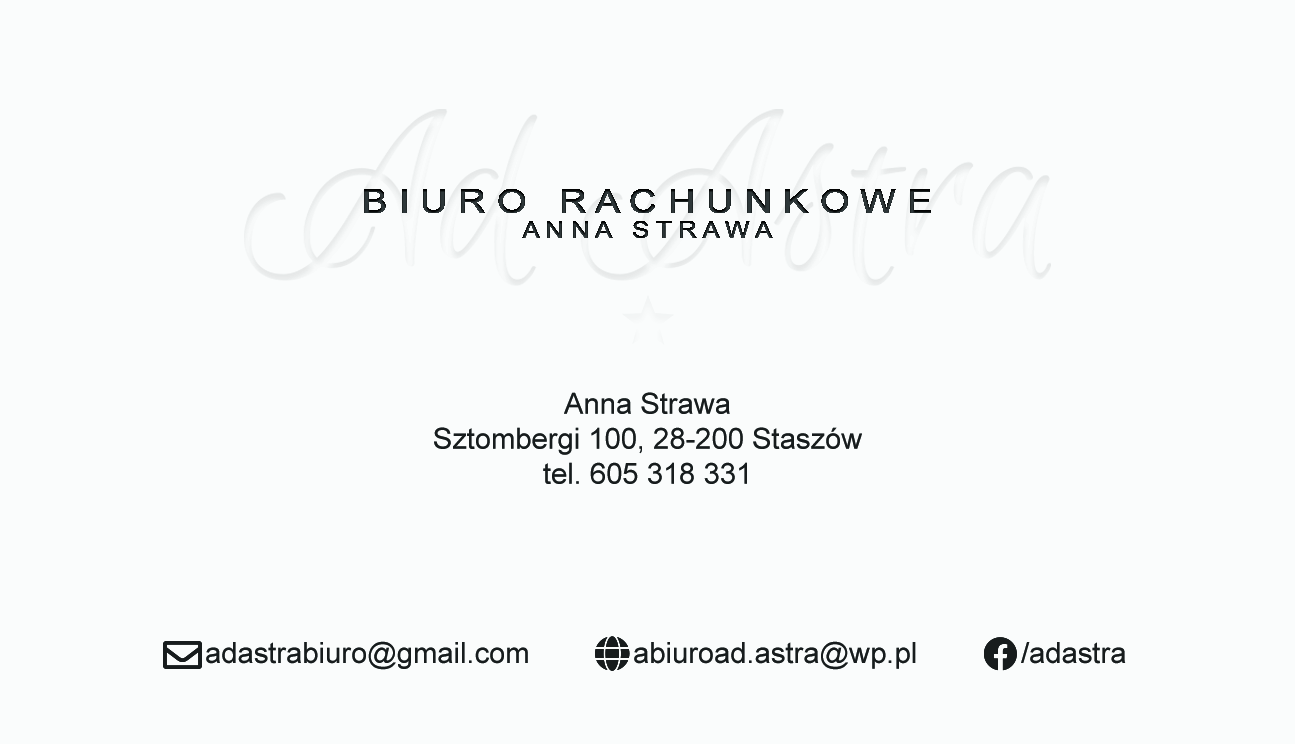
<style>
.page{position:relative;width:1295px;height:744px;background:#fafcfc}
.page>*{position:absolute;margin:0}
.t1{font:29.2px "ArialMT";color:#171c1d}
</style>
<div class="page">
<p class="t1" style="left:434px;top:392px;width:428px;height:92px;text-align:center">Anna Strawa<br>Sztombergi 100, 28-200 Staszów<br>tel. 605 318 331</p>
<p class="t1" style="left:206px;top:641px;width:322px;height:29px">adastrabiuro@gmail.com</p>
<p class="t1" style="left:634px;top:641px;width:282px;height:29px">abiuroad.astra@wp.pl</p>
<p class="t1" style="left:1021px;top:642px;width:105px;height:22px">/adastra</p>
</div>
